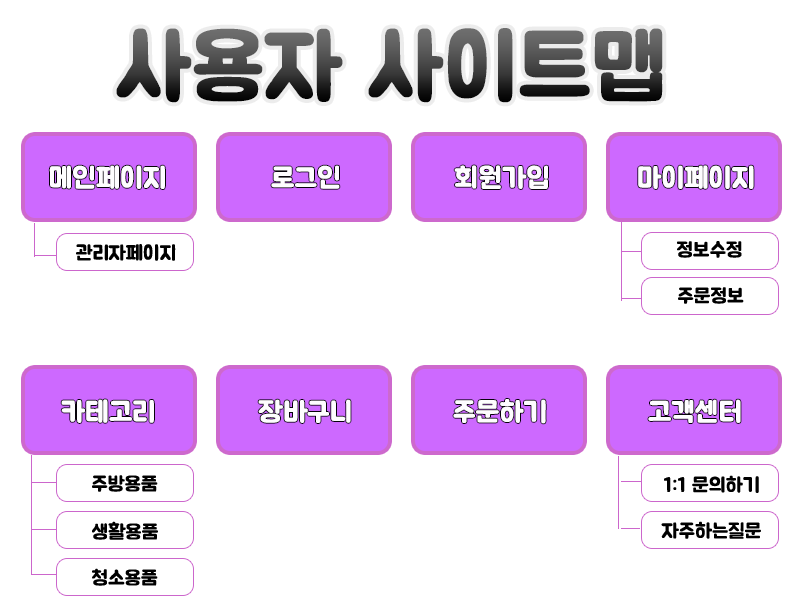
<style>
.page{position:relative;width:800px;height:600px;background:#ffffff}
.page>*{position:absolute;margin:0}
.t1{font:90px "BMJUA";font-weight:bold}
.t2{font:28px "BMJUA";color:#ffffff;font-weight:bold}
.t3{font:20px "BMJUA";color:#000000;font-weight:bold}
</style>
<div class="page">
<p class="t1" style="left:116px;top:28px;width:547px;height:75px">사용자 사이트맵</p>
<p class="t2" style="left:49px;top:165px;width:116px;height:24px">메인페이지</p>
<p class="t2" style="left:271px;top:165px;width:69px;height:24px">로그인</p>
<p class="t2" style="left:454px;top:165px;width:94px;height:24px">회원가입</p>
<p class="t2" style="left:638px;top:165px;width:116px;height:24px">마이페이지</p>
<p class="t3" style="left:76px;top:244px;width:100px;height:17px">관리자페이지</p>
<p class="t3" style="left:677px;top:241px;width:65px;height:17px">정보수정</p>
<p class="t3" style="left:678px;top:287px;width:66px;height:17px">주문정보</p>
<p class="t2" style="left:61px;top:399px;width:93px;height:24px">카테고리</p>
<p class="t2" style="left:258px;top:399px;width:93px;height:24px">장바구니</p>
<p class="t2" style="left:453px;top:399px;width:93px;height:25px">주문하기</p>
<p class="t2" style="left:648px;top:399px;width:93px;height:24px">고객센터</p>
<p class="t3" style="left:92px;top:475px;width:66px;height:17px">주방용품</p>
<p class="t3" style="left:664px;top:475px;width:95px;height:18px">1:1 문의하기</p>
<p class="t3" style="left:92px;top:521px;width:66px;height:19px">생활용품</p>
<p class="t3" style="left:661px;top:521px;width:100px;height:18px">자주하는질문</p>
<p class="t3" style="left:92px;top:568px;width:66px;height:18px">청소용품</p>
</div>
